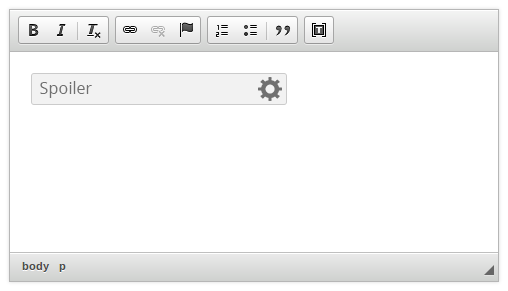
<style>
.page{position:relative;width:508px;height:291px;background:#ffffff}
.page>*{position:absolute;margin:0}
.t1{font:16px "OpenSans";color:#707070}
</style>
<div class="page">
<p class="t1" style="left:40px;top:81px;width:52px;height:17px">Spoiler</p>
</div>
